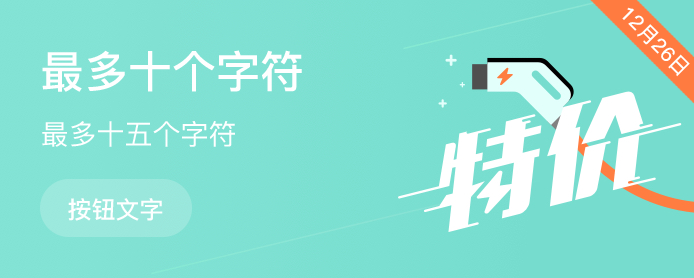
<style>
.page{position:relative;width:694px;height:278px}
.page>*{position:absolute;margin:0}
.t1{font:20px "DFPKingGothicGB-Medium";color:#ffffff}
.t2{font:44px "DFPKingGothicGB-Medium";color:#ffffff}
.t3{font:28px "DFPKingGothicGB-Regular";color:#ffffff}
.t4{font:24px "DFPKingGothicGB-Medium";color:#ffffff}
</style>
<div class="page">
<p class="t1" style="left:622px;top:7px;width:68px;height:70px;rotate:45deg">12月26日</p>
<p class="t2" style="left:42px;top:50px;width:260px;height:42px">最多十个字符</p>
<p class="t3" style="left:42px;top:121px;width:193px;height:26px">最多十五个字符</p>
<p class="t4" style="left:68px;top:198px;width:95px;height:23px">按钮文字</p>
</div>
